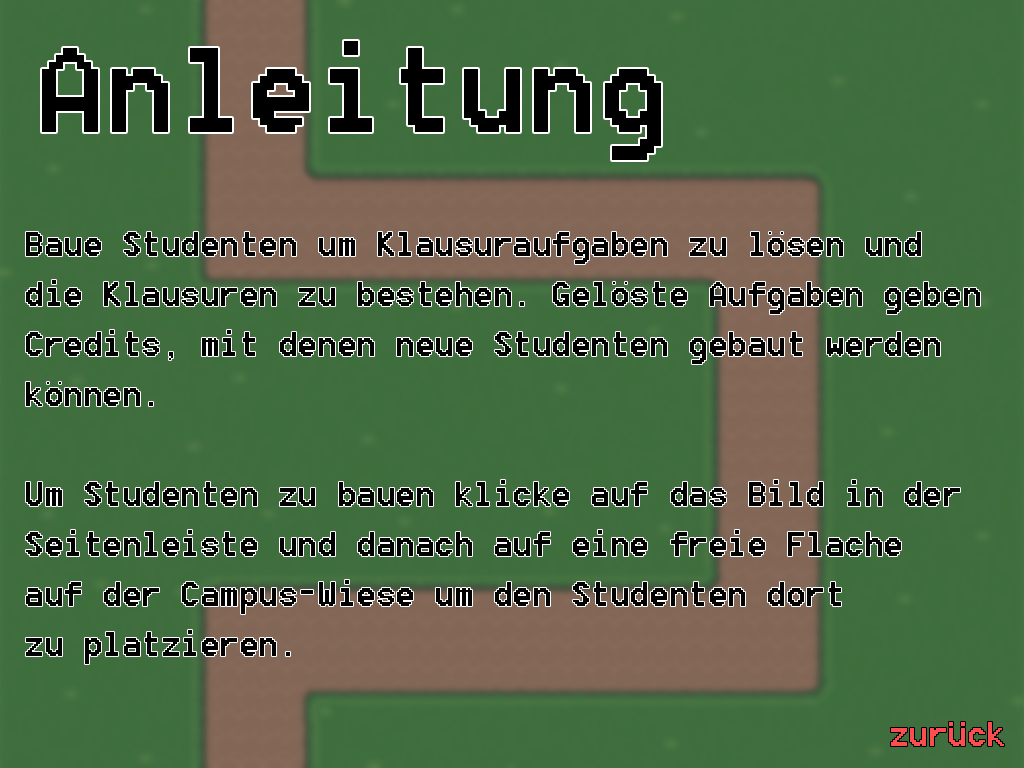
<style>
.page{position:relative;width:1024px;height:768px;background:#406e3e}
.page>*{position:absolute;margin:0}
.t1{font:150px "8514oem";color:#000000}
.t2{font:41.7px "8514oem";color:#000000}
</style>
<div class="page">
<p class="t1" style="left:42px;top:41px;width:619px;height:119px">Anleitung</p>
<p class="t2" style="left:26px;top:232px;width:954px;height:432px">Baue Studenten um Klausuraufgaben zu losen und<br>die Klausuren zu bestehen. Geloste Aufgaben geben<br>Credits, mit denen neue Studenten gebaut werden <br>konnen.<br><br>Um Studenten zu bauen klicke auf das Bild in der<br>Seitenleiste und danach auf eine freie Flache<br>auf der Campus-Wiese um den Studenten dort <br>zu platzieren.</p>
</div>
